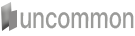
<style>
.page{position:relative;width:135px;height:36px;background:#ffffff}
.page>*{position:absolute;margin:0}
.t1{font:29.4px "PretendardVariable-Medium";color:#9b9b99;scale:0.77 1}
</style>
<div class="page">
<p class="t1" style="left:20px;top:12px;width:114px;height:17px">uncommon</p>
</div>
